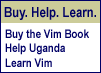
<style>
.page{position:relative;width:101px;height:73px;background:#ffffff}
.page>*{position:absolute;margin:0}
.t1{font:14px "ArialNarrow-Bold";color:#000066}
.t2{font:12px "ArialNarrow-Bold";color:#000066}
</style>
<div class="page">
<p class="t1" style="left:4px;top:7px;width:92px;height:13px">Buy. Help. Learn.</p>
<p class="t2" style="left:5px;top:29px;width:84px;height:38px">Buy the Vim Book<br>Help Uganda<br>Learn Vim</p>
</div>
